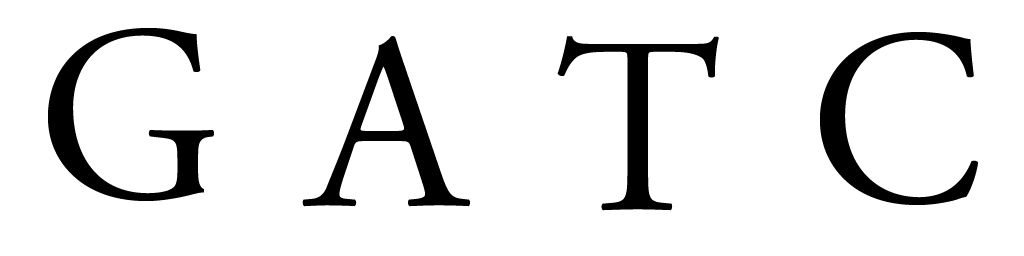
<style>
.page{position:relative;width:1024px;height:256px;background:#ffffff}
.page>*{position:absolute;margin:0}
.t1{font:250px "AGaramondPro-Regular";color:#000000}
</style>
<div class="page">
<p class="t1" style="left:48px;top:28px;width:166px;height:173px">G</p>
<p class="t1" style="left:302px;top:36px;width:168px;height:171px">A</p>
<p class="t1" style="left:557px;top:36px;width:162px;height:175px">T</p>
<p class="t1" style="left:820px;top:32px;width:158px;height:173px">C</p>
</div>
